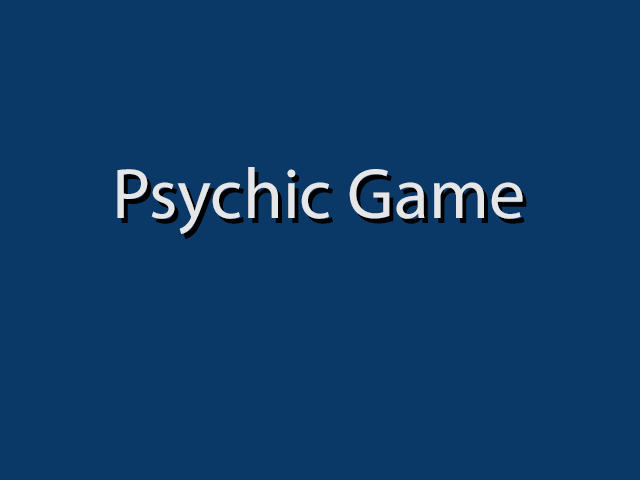
<style>
.page{position:relative;width:640px;height:480px;background:#0b3967}
.page>*{position:absolute;margin:0}
.t1{font:72px "MyriadPro-Regular";color:#e4e6e8}
</style>
<div class="page">
<p class="t1" style="left:117px;top:167px;width:406px;height:67px">Psychic Game</p>
</div>
